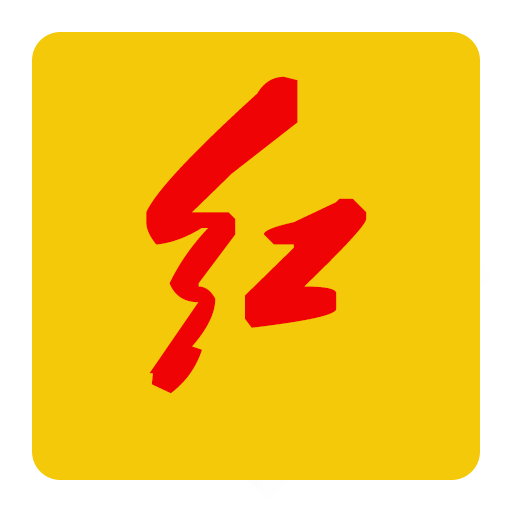
<style>
.page{position:relative;width:512px;height:512px;background:#f3c909}
.page>*{position:absolute;margin:0}
.t1{font:284px "²ÝÌ´Õ«Ã«Ôó¶«×ÖÌå";color:#f00304}
</style>
<div class="page">
<p class="t1" style="left:146px;top:76px;width:221px;height:318px">红</p>
</div>
